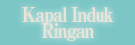
<style>
.page{position:relative;width:135px;height:45px;background:#7dc6c6}
.page>*{position:absolute;margin:0}
.t1{font:20px/16px "RyuminPro-ExBold";letter-spacing:-0.08em;color:#f1e6d8;scale:0.9 1}
</style>
<div class="page">
<p class="t1" style="left:22px;top:7px;width:92px;height:34px;text-align:center">Kapal Induk<br>Ringan</p>
</div>
